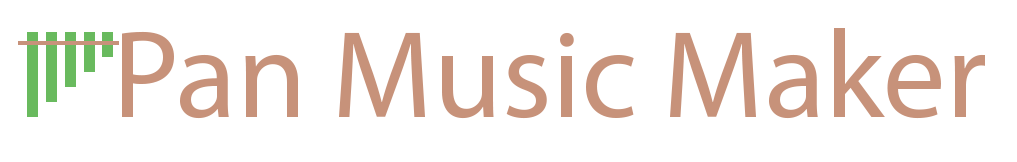
<style>
.page{position:relative;width:1017px;height:162px;background:#ffffff}
.page>*{position:absolute;margin:0}
.t1{font:125px "MyriadPro-Regular";color:#c7927a}
</style>
<div class="page">
<p class="t1" style="left:122px;top:28px;width:863px;height:91px">Pan Music Maker</p>
</div>
